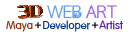
<style>
.page{position:relative;width:130px;height:32px;background:#ffffff}
.page>*{position:absolute;margin:0}
.t1{font:16px "AppleGothic";letter-spacing:-0.025em;color:#689ee7}
.t2{font:16px "AppleGothic";letter-spacing:-0.025em;color:#9b68e7}
.t3{font:12px "HYkanM";letter-spacing:-0.025em;color:#8f360f}
.t4{font:12px "HYkanM";letter-spacing:-0.025em}
.t5{font:12px "HYkanM";letter-spacing:-0.025em;color:#0c3a87}
.t6{font:12px "HYkanM";letter-spacing:-0.025em;color:#5519ae}
</style>
<div class="page">
<p class="t1" style="left:47px;top:5px;width:35px;height:14px">WEB</p>
<p class="t2" style="left:85px;top:5px;width:32px;height:14px">ART</p>
<p class="t3" style="left:6px;top:20px;width:27px;height:12px">Maya</p>
<p class="t4" style="left:34px;top:22px;width:8px;height:7px">+</p>
<p class="t5" style="left:43px;top:20px;width:48px;height:12px">Developer</p>
<p class="t4" style="left:91px;top:22px;width:8px;height:7px">+</p>
<p class="t6" style="left:99px;top:20px;width:24px;height:10px">Artist</p>
</div>
